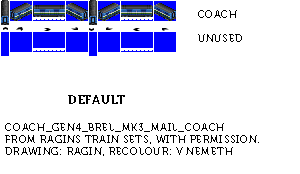
<style>
.page{position:relative;width:300px;height:174px;background:#ffffff}
.page>*{position:absolute;margin:0}
.t1{font:10px "Museo700-Regular";letter-spacing:0.075em;color:#000000;text-transform:uppercase}
.t2{font:12px "Museo700-Regular";letter-spacing:0.075em;color:#000000;text-transform:uppercase}
</style>
<div class="page">
<p class="t1" style="left:198px;top:10px;width:44px;height:32px">coach<br><br>unused</p>
<p class="t2" style="left:68px;top:95px;width:57px;height:9px">DEFAULT</p>
<p class="t1" style="left:5px;top:123px;width:254px;height:33px">Coach_Gen4_BREL_Mk3_mail_Coach<br>From Ragins Train Sets, with permission.<br>Drawing: Ragin, recolour: V Nemeth</p>
</div>
